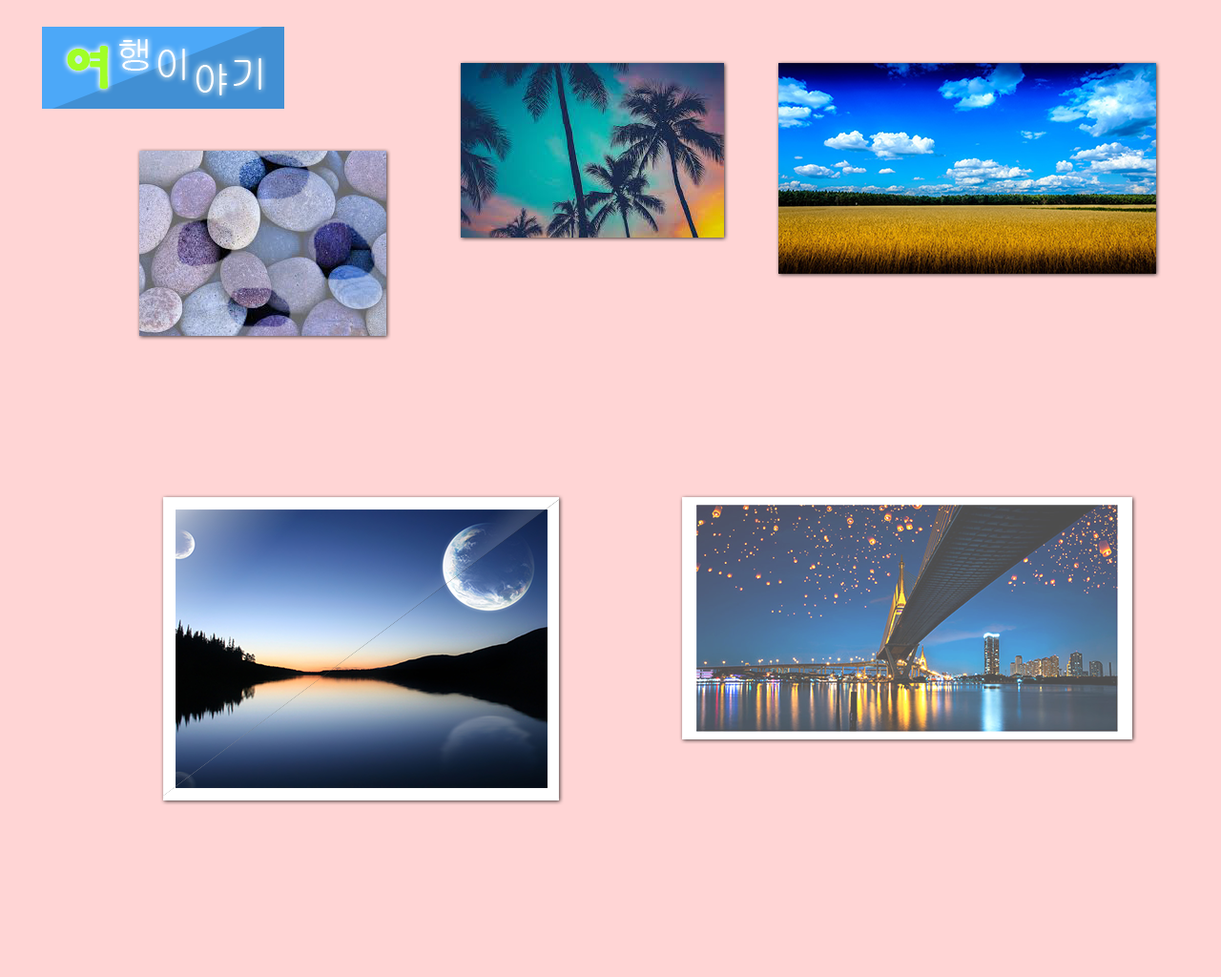
<style>
.page{position:relative;width:1221px;height:977px;background:#ffd5d5}
.page>*{position:absolute;margin:0}
.t1{font:38.1px "Gulim";color:#ffffff}
.t2{font:50.8px "YetR-HM";color:#a1ff27;font-weight:bold}
</style>
<div class="page">
<p class="t1" style="left:67px;top:39px;width:194px;height:56px"><span class="t2">여</span>행이야기</p>
</div>
